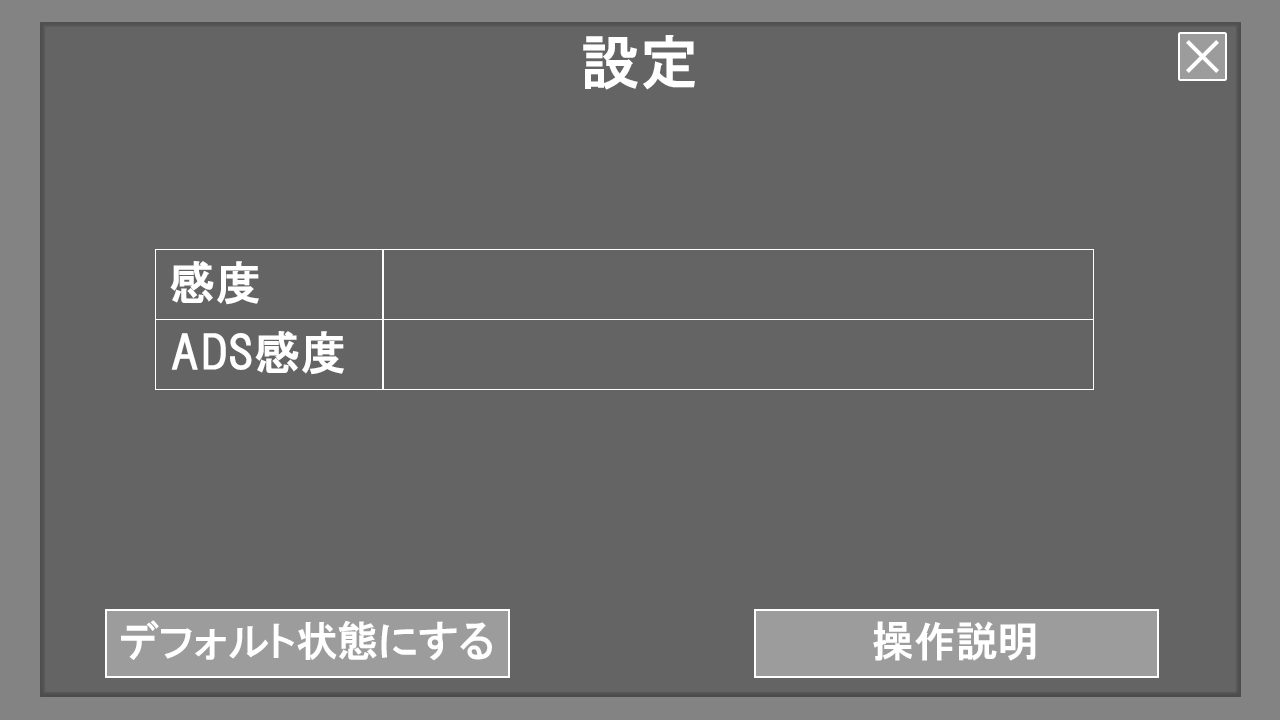
<style>
.page{position:relative;width:1280px;height:720px;background:#646464}
.page>*{position:absolute;margin:0}
.t1{font:58.3px "HGPGothicE";color:#ffffff}
.t2{font:45.8px "HGPGothicE";color:#ffffff}
.t3{font:41.7px "HGPGothicE";color:#ffffff}
</style>
<div class="page">
<p class="t1" style="left:583px;top:35px;width:112px;height:55px">設定</p>
<p class="t2" style="left:170px;top:261px;width:89px;height:44px">感度</p>
<p class="t2" style="left:171px;top:331px;width:173px;height:44px">ADS感度</p>
<p class="t3" style="left:121px;top:620px;width:371px;height:41px">デフォルト状態にする</p>
<p class="t3" style="left:873px;top:621px;width:163px;height:40px">操作説明</p>
</div>
